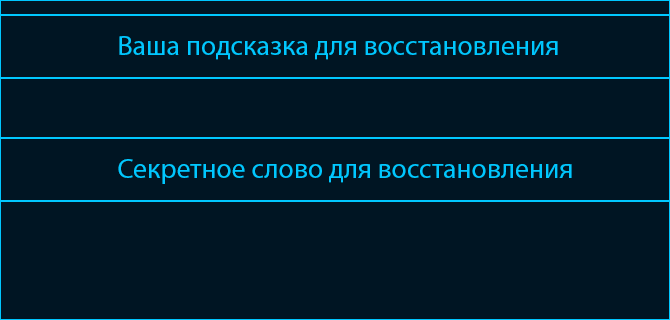
<style>
.page{position:relative;width:670px;height:320px;background:#001523}
.page>*{position:absolute;margin:0}
.t1{font:27.8px "MyriadPro-Regular";color:#00c7ff}
</style>
<div class="page">
<p class="t1" style="left:119px;top:36px;width:439px;height:24px">Ваша подсказка для восстановления</p>
<p class="t1" style="left:118px;top:159px;width:454px;height:25px">Секретное слово для восстановления</p>
</div>
